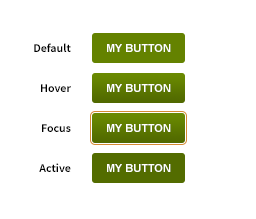
<style>
.page{position:relative;width:256px;height:219px;background:#ffffff}
.page>*{position:absolute;margin:0}
.t1{font:12px "SourceSansPro-Semibold";color:#000000}
.t2{font:11px "Arial-BoldMT";color:#ffffff}
</style>
<div class="page">
<p class="t1" style="left:34px;top:43px;width:37px;height:9px">Default</p>
<p class="t2" style="left:107px;top:44px;width:64px;height:8px">MY BUTTON</p>
<p class="t1" style="left:41px;top:84px;width:30px;height:8px">Hover</p>
<p class="t2" style="left:107px;top:84px;width:64px;height:8px">MY BUTTON</p>
<p class="t1" style="left:42px;top:124px;width:29px;height:8px">Focus</p>
<p class="t2" style="left:107px;top:124px;width:64px;height:8px">MY BUTTON</p>
<p class="t1" style="left:39px;top:163px;width:32px;height:9px">Active</p>
<p class="t2" style="left:107px;top:164px;width:64px;height:8px">MY BUTTON</p>
</div>
